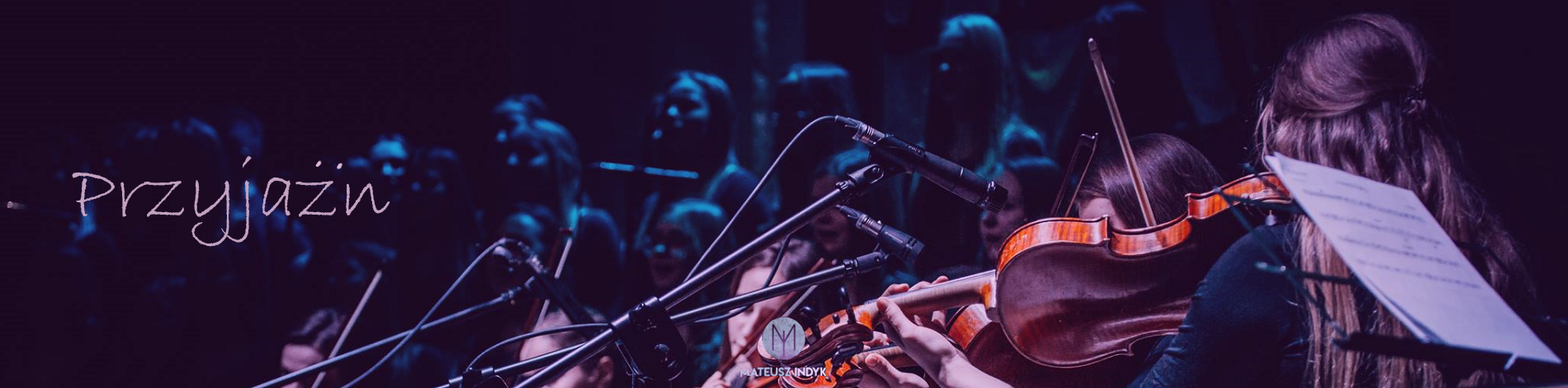
<style>
.page{position:relative;width:1568px;height:388px}
.page>*{position:absolute;margin:0}
.t1{font:79.2px "BradleyHandITC";color:#c3a2c2}
</style>
<div class="page">
<p class="t1" style="left:72px;top:156px;width:318px;height:91px">Przyjazn</p>
</div>
